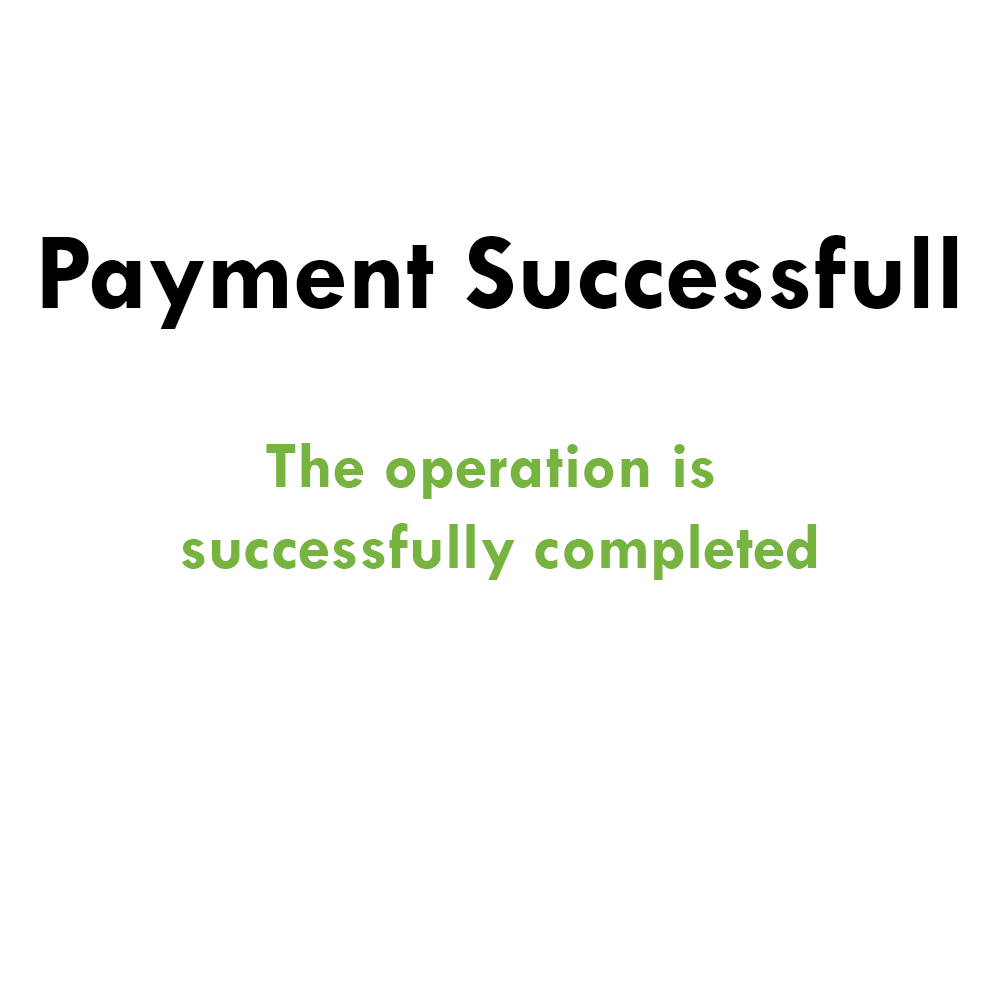
<style>
.page{position:relative;width:1000px;height:1000px;background:#ffffff}
.page>*{position:absolute;margin:0}
.t1{font:110.9px "TwCenMT-Bold";color:#000000}
.t2{font:67.5px "TwCenMT-Bold";color:#77b43f}
</style>
<div class="page">
<p class="t1" style="left:42px;top:235px;width:916px;height:94px">Payment Successfull</p>
<p class="t2" style="left:181px;top:443px;width:636px;height:137px;text-align:center">The operation is <br>successfully completed</p>
</div>
